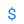
<style>
.page{position:relative;width:24px;height:24px;background:#ffffff}
.page>*{position:absolute;margin:0}
.t1{font:14.4px "Roboto-Regular";color:#007aff;scale:1.15 1}
</style>
<div class="page">
<p class="t1" style="left:8px;top:7px;width:8px;height:14px">$</p>
</div>
